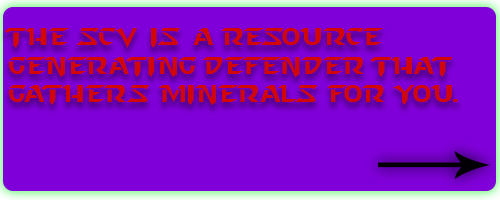
<style>
.page{position:relative;width:500px;height:200px;background:#8000d9}
.page>*{position:absolute;margin:0}
.t1{font:24px "StarcraftNormal";color:#d20606}
</style>
<div class="page">
<p class="t1" style="left:5px;top:28px;width:454px;height:77px">The scv is a resource <br>generating defender that gathers minerals for you.</p>
</div>
